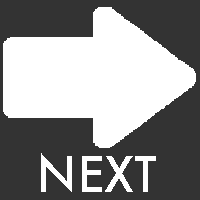
<style>
.page{position:relative;width:200px;height:200px;background:#333333}
.page>*{position:absolute;margin:0}
.t1{font:48px "Futura-Medium";color:#ffffff}
</style>
<div class="page">
<p class="t1" style="left:41px;top:153px;width:115px;height:39px">NEXT</p>
</div>
